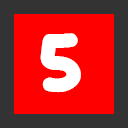
<style>
.page{position:relative;width:128px;height:128px;background:#ff0000}
.page>*{position:absolute;margin:0}
.t1{font:96.2px "Mabook";letter-spacing:0.075em;color:#ffffff}
</style>
<div class="page">
<p class="t1" style="left:40px;top:33px;width:41px;height:60px">5</p>
</div>
